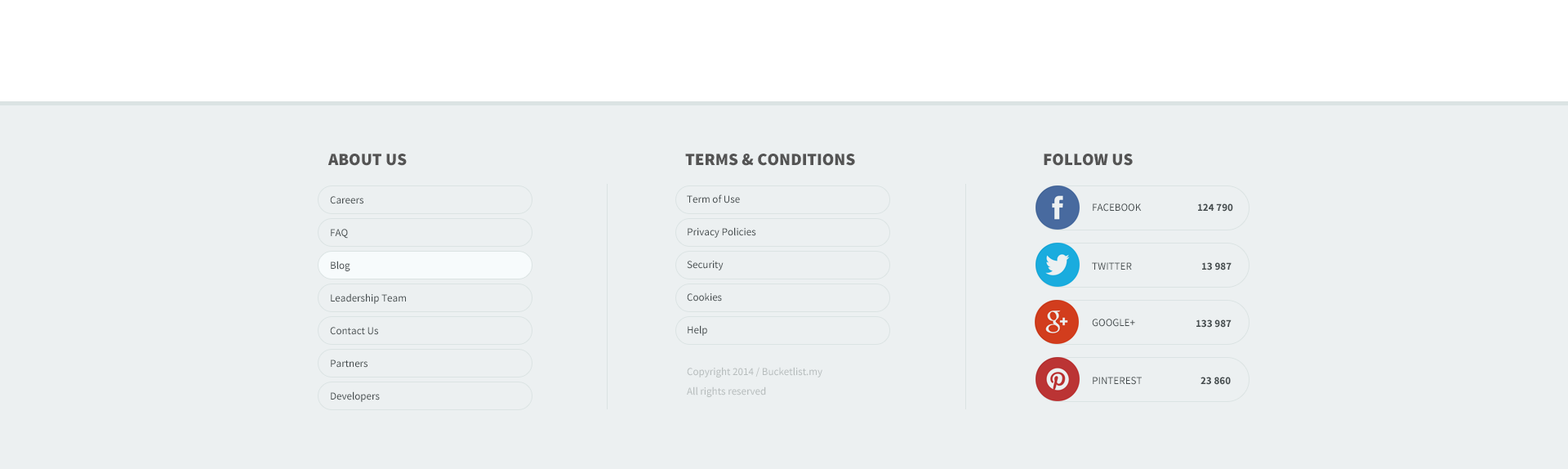
<style>
.page{position:relative;width:1568px;height:469px;background:#ecf0f1}
.page>*{position:absolute;margin:0}
.t1{font:17.1px "SourceSansPro-Black";color:#545454;text-transform:uppercase}
.t2{font:10.6px/32.7px "SourceSansPro-Regular";color:#454c4e}
.t3{font:10.6px "SourceSansPro-Regular";color:#454c4e;text-transform:uppercase}
.t4{font:10.6px "SourceSansPro-Bold";color:#454c4e;text-transform:uppercase}
.t5{font:10.6px/19.6px "SourceSansPro-Regular";color:#b7bdbd}
</style>
<div class="page">
<p class="t1" style="left:327px;top:154px;width:80px;height:12px">About us</p>
<p class="t1" style="left:685px;top:154px;width:170px;height:12px">Terms &amp; Conditions</p>
<p class="t1" style="left:1044px;top:154px;width:89px;height:12px">Follow us</p>
<p class="t2" style="left:330px;top:196px;width:76px;height:206px">Careers<br>FAQ<br>Blog<br>Leadership Team<br>Contact Us<br>Partners<br>Developers</p>
<p class="t2" style="left:687px;top:194px;width:69px;height:142px">Term of Use<br>Privacy Policies<br>Security<br>Cookies<br>Help</p>
<p class="t3" style="left:1093px;top:203px;width:49px;height:9px">Facebook</p>
<p class="t4" style="left:1198px;top:203px;width:35px;height:9px">124 790</p>
<p class="t3" style="left:1092px;top:262px;width:40px;height:8px">Twitter</p>
<p class="t4" style="left:1202px;top:262px;width:30px;height:8px">13 987</p>
<p class="t3" style="left:1092px;top:318px;width:43px;height:9px">Google+</p>
<p class="t4" style="left:1196px;top:319px;width:36px;height:8px">133 987</p>
<p class="t5" style="left:687px;top:367px;width:135px;height:30px">Copyright 2014 / Bucketlist.my<br>All rights reserved</p>
<p class="t3" style="left:1093px;top:376px;width:49px;height:9px">Pinterest</p>
<p class="t4" style="left:1200px;top:376px;width:31px;height:9px">23 860</p>
</div>
